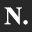
<style>
.page{position:relative;width:32px;height:32px;background:#282828}
.page>*{position:absolute;margin:0}
.t1{font:25px "TimesNewRomanPS-BoldMT";color:#ffffff}
</style>
<div class="page">
<p class="t1" style="left:4px;top:7px;width:24px;height:18px">N.</p>
</div>
